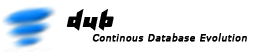
<style>
.page{position:relative;width:256px;height:52px;background:#ffffff}
.page>*{position:absolute;margin:0}
.t1{font:30px "KlingonBlade";letter-spacing:0.05em;color:#000000;font-style:italic;scale:1.18 1}
.t2{font:9px "Verdana";letter-spacing:0.05em;color:#000000;font-weight:bold;font-style:italic}
</style>
<div class="page">
<p class="t1" style="left:66px;top:9px;width:48px;height:22px">dub</p>
<p class="t2" style="left:92px;top:33px;width:155px;height:9px">Continous Database Evolution</p>
</div>
